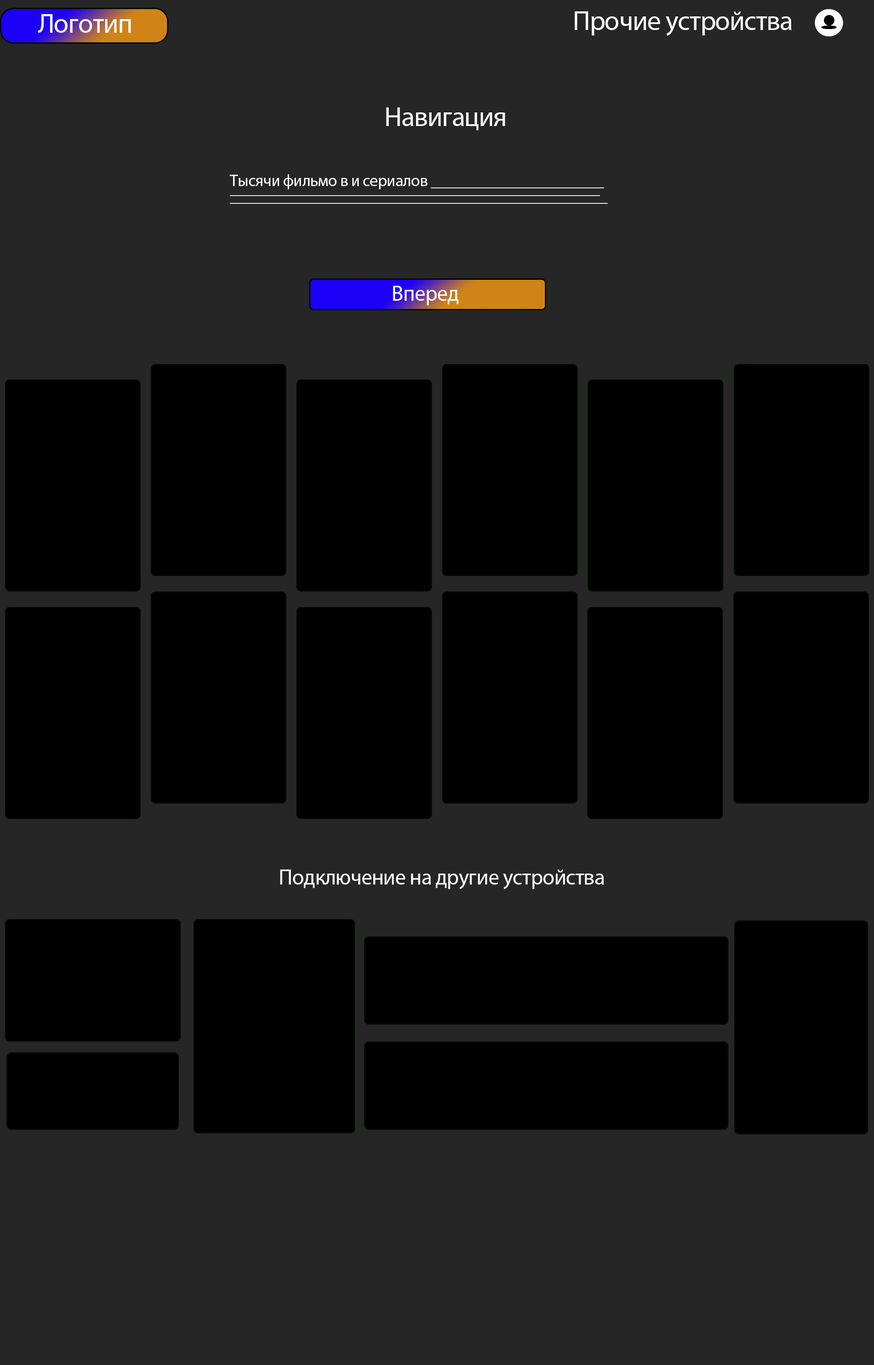
<style>
.page{position:relative;width:874px;height:1365px;background:#262626}
.page>*{position:absolute;margin:0}
.t1{font:27.3px "MyriadPro-Regular";letter-spacing:-0.02em;color:#ffffff}
.t2{font:27.3px "MyriadPro-Regular";letter-spacing:-0.02em;color:#fefefe}
.t3{font:16.4px/7.6px "MyriadPro-Regular";letter-spacing:-0.02em;color:#fefefe}
.t4{font:21.8px "MyriadPro-Regular";letter-spacing:-0.02em;color:#fefefe}
</style>
<div class="page">
<p class="t1" style="left:38px;top:14px;width:93px;height:19px">Логотип</p>
<p class="t2" style="left:574px;top:11px;width:217px;height:25px">Прочие устройства</p>
<p class="t2" style="left:386px;top:107px;width:119px;height:24px">Навигация</p>
<p class="t3" style="left:229px;top:174px;width:378px;height:30px">Тысячи фильмо в и сериалов ______________________<br>_______________________________________________<br>________________________________________________</p>
<p class="t4" style="left:393px;top:286px;width:65px;height:19px">Вперед</p>
<p class="t4" style="left:280px;top:869px;width:324px;height:20px">Подключение на другие устройства</p>
</div>
